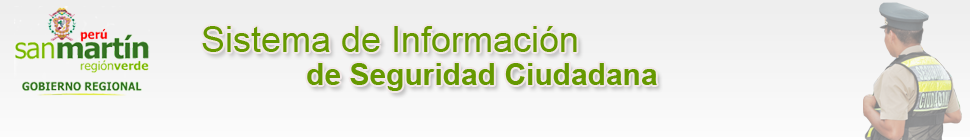
<style>
.page{position:relative;width:970px;height:140px}
.page>*{position:absolute;margin:0}
.t1{font:36px "ArialMT";color:#669900}
.t2{font:30px "Arial-BoldMT";color:#669900}
</style>
<div class="page">
<p class="t1" style="left:202px;top:26px;width:375px;height:26px">Sistema de Información</p>
<p class="t2" style="left:307px;top:63px;width:350px;height:28px">de Seguridad Ciudadana</p>
</div>
